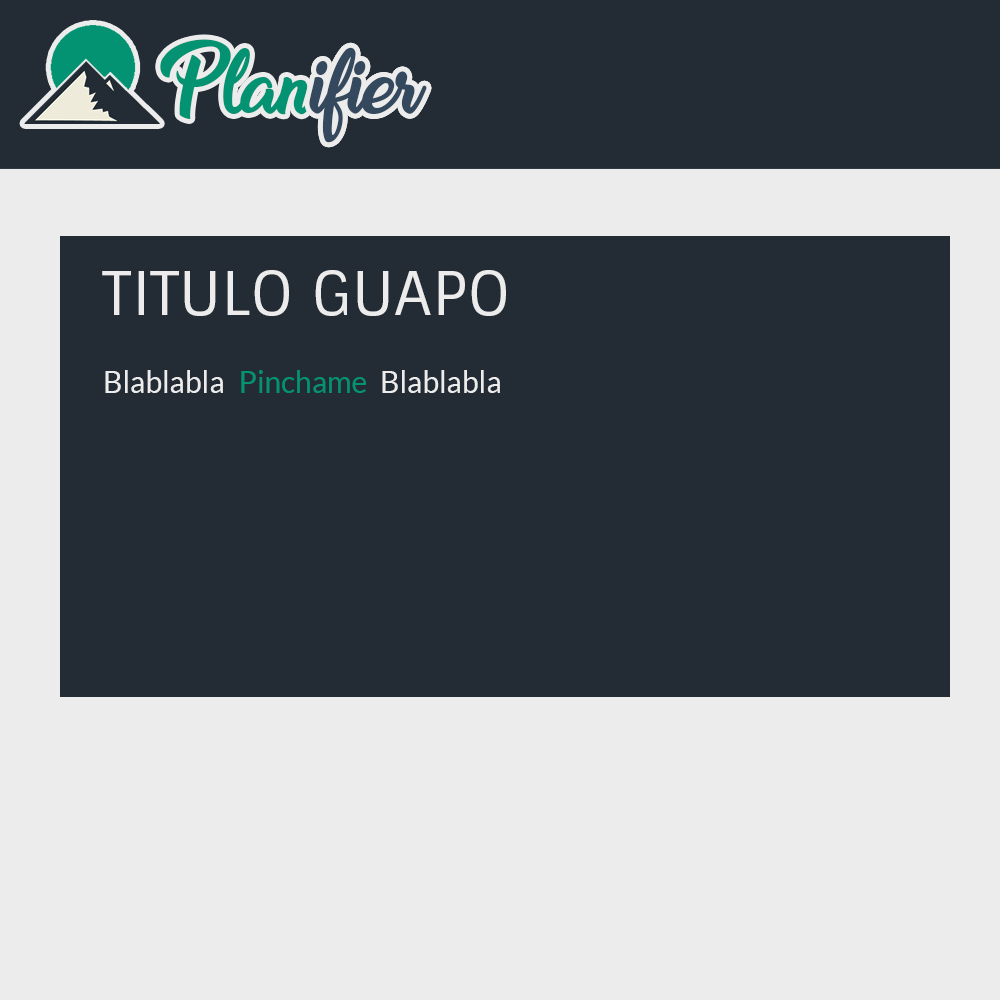
<style>
.page{position:relative;width:1000px;height:1000px;background:#232c35}
.page>*{position:absolute;margin:0}
.t1{font:100.7px "SweetSensationsPersonalUse"}
.t2{font:60px "Sintony-Regular";color:#ececec}
.t3{font:30px "Lato-Regular";color:#ececec}
.t4{font:30px "Lato-Regular";color:#049372}
</style>
<div class="page">
<p class="t1" style="left:160px;top:39px;width:267px;height:104px">Planifier</p>
<p class="t2" style="left:102px;top:270px;width:404px;height:46px">TITULO GUAPO</p>
<p class="t3" style="left:105px;top:370px;width:118px;height:23px">Blablabla</p>
<p class="t4" style="left:241px;top:370px;width:125px;height:23px">Pinchame</p>
<p class="t3" style="left:382px;top:370px;width:118px;height:23px">Blablabla</p>
</div>
